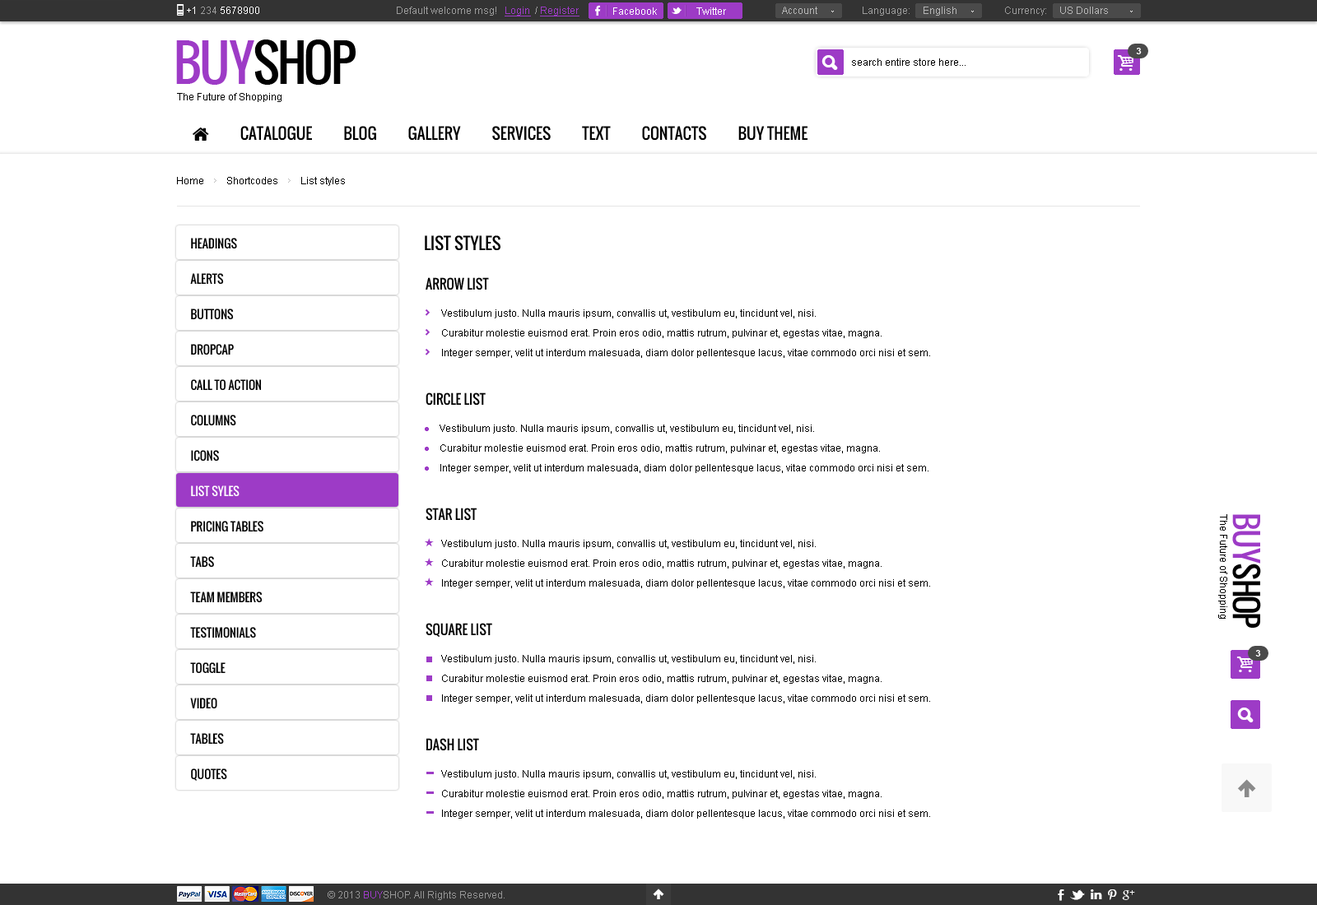
<style>
.page{position:relative;width:1317px;height:905px;background:#ffffff}
.page>*{position:absolute;margin:0}
.t1{font:9.9px "ArialMT";color:#ffffff}
.t2{font:9.9px "ArialMT";color:#9b9b9b}
.t3{font:9.9px "ArialMT";color:#9d3bc6;text-decoration:underline}
.t4{font:9.9px "ArialMT";color:#b6b6b6}
.t5{font:49.4px "Oswald";letter-spacing:-0.06em;color:#000000;text-transform:uppercase}
.t6{font:49.4px "Oswald";letter-spacing:-0.06em;color:#9d3bc6;text-transform:uppercase}
.t7{font:9.1px "Arial-BoldMT";color:#ffffff;text-transform:uppercase}
.t8{font:9.9px "ArialMT";color:#000000}
.t9{font:11.5px/35.4px "Oswald";color:#000000;text-transform:uppercase}
.t10{font:11.5px/35.4px "Oswald";color:#ffffff;text-transform:uppercase}
.t11{font:16.5px "Oswald";color:#000000;text-transform:uppercase}
.t12{font:13.2px "Oswald";color:#000000;text-transform:uppercase}
.t13{font:9.9px/19.8px "ArialMT";color:#000000}
.t14{font:9.9px/4.9px "ArialMT";color:#9d3bc6}
.t15{font:31.3px "Oswald";letter-spacing:-0.06em;color:#000000;text-transform:uppercase}
.t16{font:31.3px "Oswald";letter-spacing:-0.06em;color:#9d3bc6;text-transform:uppercase}
.t17{font:9.9px/19.8px "andepict";color:#9d3bc6}
.t18{font:9.9px "ArialMT";color:#959595}
.t19{font:9.9px "ArialMT";color:#9d3bc6}
</style>
<div class="page">
<p class="t1" style="left:187px;top:7px;width:72px;height:7px">+1 <span class="t2">234 </span>5678900</p>
<p class="t2" style="left:397px;top:7px;width:182px;height:9px">Default welcome msg!   <span class="t3">Login </span> / <span class="t3">Register</span></p>
<p class="t2" style="left:397px;top:7px;width:182px;height:9px">Default welcome msg!   <span class="t3">Login </span> / <span class="t3">Register</span></p>
<p class="t1" style="left:613px;top:7px;width:44px;height:8px">Facebook</p>
<p class="t1" style="left:696px;top:7px;width:30px;height:8px">Twitter</p>
<p class="t4" style="left:782px;top:7px;width:35px;height:7px">Account</p>
<p class="t2" style="left:863px;top:7px;width:93px;height:9px">Language:     <span class="t4">English</span></p>
<p class="t4" style="left:1005px;top:7px;width:103px;height:9px"><span class="t2">Currency:     </span>US Dollars</p>
<p class="t5" style="left:176px;top:40px;width:180px;height:45px"><span class="t6">buy</span>shop</p>
<p class="t7" style="left:1136px;top:48px;width:6px;height:6px">3</p>
<p class="t8" style="left:852px;top:58px;width:114px;height:8px">search entire store here...</p>
<p class="t8" style="left:177px;top:93px;width:105px;height:9px">The Future of Shopping</p>
<p class="t8" style="left:177px;top:177px;width:168px;height:9px">Home         Shortcodes         List styles</p>
<p class="t9" style="left:190px;top:238px;width:73px;height:543px">Headings<br>Alerts<br>Buttons<br>Dropcap<br>Call To Action<br>Columns<br>Icons<br><span class="t10">List syles<br></span>Pricing Tables<br>Tabs<br>Team Members<br>Testimonials<br>Toggle<br>Video<br>Tables<br>Quotes</p>
<p class="t11" style="left:425px;top:235px;width:75px;height:16px">List Styles</p>
<p class="t12" style="left:426px;top:277px;width:63px;height:14px">ARROW LIST</p>
<p class="t13" style="left:441px;top:309px;width:489px;height:49px">Vestibulum justo. Nulla mauris ipsum, convallis ut, vestibulum eu, tincidunt vel, nisi. <br>Curabitur molestie euismod erat. Proin eros odio, mattis rutrum, pulvinar et, egestas vitae, magna. <br>Integer semper, velit ut interdum malesuada, diam dolor pellentesque lacus, vitae commodo orci nisi et sem.</p>
<p class="t12" style="left:426px;top:393px;width:60px;height:13px">CIRCLE LIST</p>
<p class="t13" style="left:425px;top:425px;width:503px;height:48px"><span class="t14">●    </span>Vestibulum justo. Nulla mauris ipsum, convallis ut, vestibulum eu, tincidunt vel, nisi. <br><span class="t14">●    </span>Curabitur molestie euismod erat. Proin eros odio, mattis rutrum, pulvinar et, egestas vitae, magna. <br><span class="t14">●    </span>Integer semper, velit ut interdum malesuada, diam dolor pellentesque lacus, vitae commodo orci nisi et sem.</p>
<p class="t12" style="left:426px;top:508px;width:51px;height:13px">star LIST</p>
<p class="t8" style="left:1218px;top:514px;width:9px;height:105px;rotate:90deg">The Future of Shopping</p>
<p class="t15" style="left:1232px;top:514px;width:29px;height:114px;rotate:90deg"><span class="t16">buy</span>shop</p>
<p class="t17" style="left:425px;top:538px;width:9px;height:48px">★<br>★<br>★</p>
<p class="t13" style="left:441px;top:540px;width:489px;height:49px">Vestibulum justo. Nulla mauris ipsum, convallis ut, vestibulum eu, tincidunt vel, nisi. <br>Curabitur molestie euismod erat. Proin eros odio, mattis rutrum, pulvinar et, egestas vitae, magna. <br>Integer semper, velit ut interdum malesuada, diam dolor pellentesque lacus, vitae commodo orci nisi et sem.</p>
<p class="t12" style="left:426px;top:623px;width:66px;height:14px">SQUARE LIST</p>
<p class="t7" style="left:1255px;top:650px;width:6px;height:7px">3</p>
<p class="t13" style="left:441px;top:655px;width:489px;height:49px">Vestibulum justo. Nulla mauris ipsum, convallis ut, vestibulum eu, tincidunt vel, nisi. <br>Curabitur molestie euismod erat. Proin eros odio, mattis rutrum, pulvinar et, egestas vitae, magna. <br>Integer semper, velit ut interdum malesuada, diam dolor pellentesque lacus, vitae commodo orci nisi et sem.</p>
<p class="t12" style="left:426px;top:738px;width:53px;height:14px">DASH LIST</p>
<p class="t17" style="left:426px;top:772px;width:8px;height:42px">-<br>-<br>-</p>
<p class="t13" style="left:441px;top:770px;width:489px;height:49px">Vestibulum justo. Nulla mauris ipsum, convallis ut, vestibulum eu, tincidunt vel, nisi. <br>Curabitur molestie euismod erat. Proin eros odio, mattis rutrum, pulvinar et, egestas vitae, magna. <br>Integer semper, velit ut interdum malesuada, diam dolor pellentesque lacus, vitae commodo orci nisi et sem.</p>
<p class="t18" style="left:328px;top:891px;width:177px;height:9px">© 2013 <span class="t19">BUY</span>SHOP. All Rights Reserved.</p>
</div>
